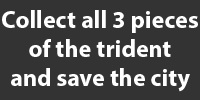
<style>
.page{position:relative;width:200px;height:100px;background:#333333}
.page>*{position:absolute;margin:0}
.t1{font:24.3px "MyriadPro-Bold";color:#ffffff}
</style>
<div class="page">
<p class="t1" style="left:2px;top:10px;width:196px;height:82px;text-align:center">Collect all 3 pieces<br> of the trident <br>and save the city</p>
</div>
